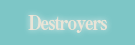
<style>
.page{position:relative;width:135px;height:45px;background:#7dc6c6}
.page>*{position:absolute;margin:0}
.t1{font:20px "RyuminPro-ExBold";letter-spacing:-0.08em;color:#f1e6d8;scale:0.9 1}
</style>
<div class="page">
<p class="t1" style="left:28px;top:15px;width:79px;height:18px">Destroyers</p>
</div>
